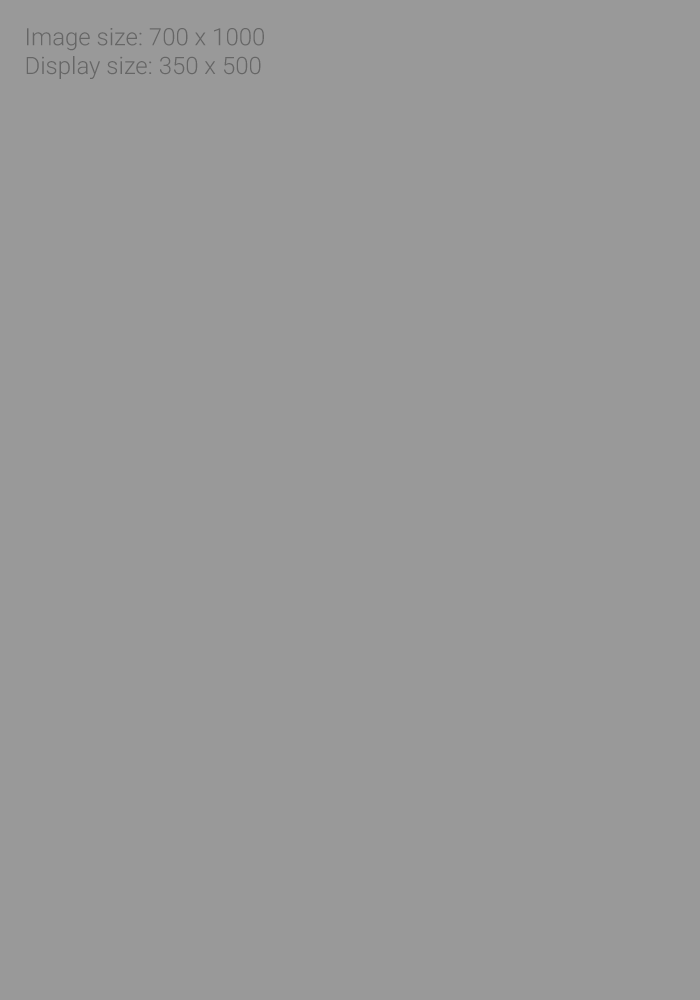
<style>
.page{position:relative;width:700px;height:1000px;background:#999999}
.page>*{position:absolute;margin:0}
.t1{font:24px "Roboto-Light";color:#666666}
</style>
<div class="page">
<p class="t1" style="left:26px;top:28px;width:238px;height:51px">Image size: 700 x 1000<br>Display size: 350 x 500</p>
</div>
